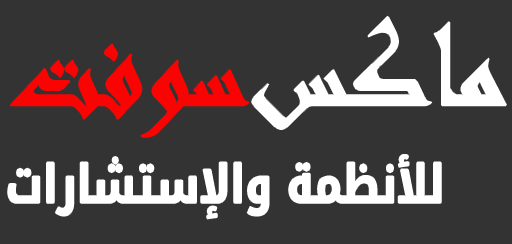
<style>
.page{position:relative;width:512px;height:244px;background:#333333}
.page>*{position:absolute;margin:0}
.t1{font:134.9px "Andalus";color:#ffffff}
.t2{font:134.9px "Andalus";color:#fa0303;scale:0.92 1}
.t3{font:52.8px "DroidArabicKufi-Bold";color:#ffffff;scale:0.81 1}
</style>
<div class="page">
<p class="t1" style="left:252px;top:16px;width:254px;height:113px">ماكس</p>
<p class="t2" style="left:10px;top:44px;width:239px;height:93px">سوفت</p>
<p class="t3" style="left:8px;top:155px;width:433px;height:64px">للأنظمة والإستشارات</p>
</div>
